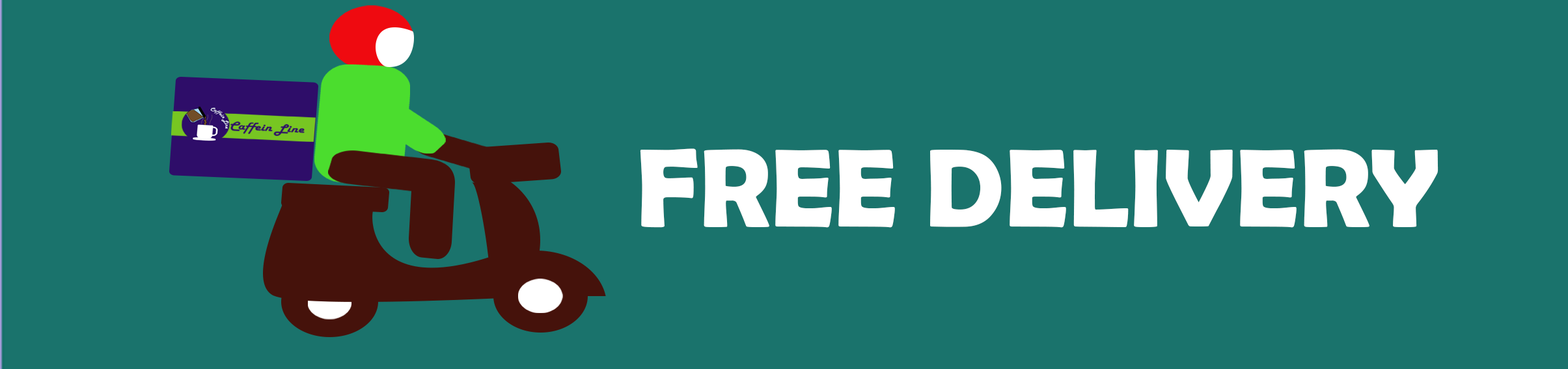
<style>
.page{position:relative;width:1568px;height:369px;background:#1a736c}
.page>*{position:absolute;margin:0}
.t1{font:112px "BerlinSansFBDemi-Bold";color:#ffffff}
</style>
<div class="page">
<p class="t1" style="left:640px;top:148px;width:798px;height:80px">FREE DELIVERY</p>
</div>
